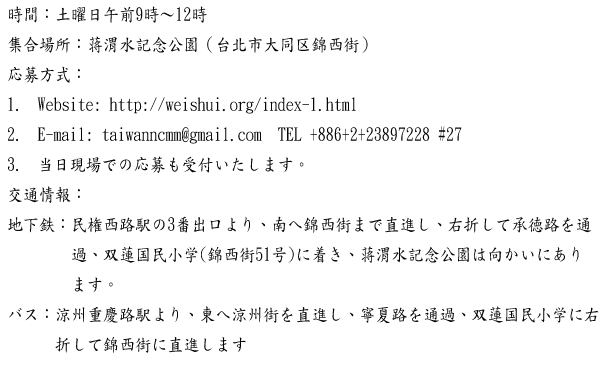
<style>
.page{position:relative;width:600px;height:366px;background:#ffffff}
.page>*{position:absolute;margin:0}
.t1{font:18px/30px "DFKaiShu-SB-Estd-BF";color:#060606;scale:0.89 1}
</style>
<div class="page">
<p class="t1" style="left:8px;top:6px;width:591px;height:347px">時間：土曜日午前9時〜12時<br>集合場所：蒋渭水記念公園（台北市大同区錦西街）<br>応募方式：<br>1. Website: http://weishui.org/index-1.html<br>2. E-mail: taiwanncmm@gmail.com  TEL +886+2+23897228 #27 <br>3. 当日現場での応募も受付いたします。<br>交通情報：<br>地下鉄：民権西路駅の3番出口より、南へ錦西街まで直進し、右折して承徳路を通<br>        過、双蓮国民小学(錦西街51号)に着き、蒋渭水記念公園は向かいにあり<br>        ます。<br>バス：涼州重慶路駅より、東へ涼州街を直進し、寧夏路を通過、双蓮国民小学に右<br>      折して錦西街に直進します</p>
</div>
